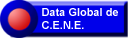
<style>
.page{position:relative;width:130px;height:38px;background:#0000ea}
.page>*{position:absolute;margin:0}
.t1{font:11px "Arial-BoldMT";color:#ffffff}
</style>
<div class="page">
<p class="t1" style="left:42px;top:8px;width:76px;height:21px">Data Global de<br>C.E.N.E.</p>
</div>
